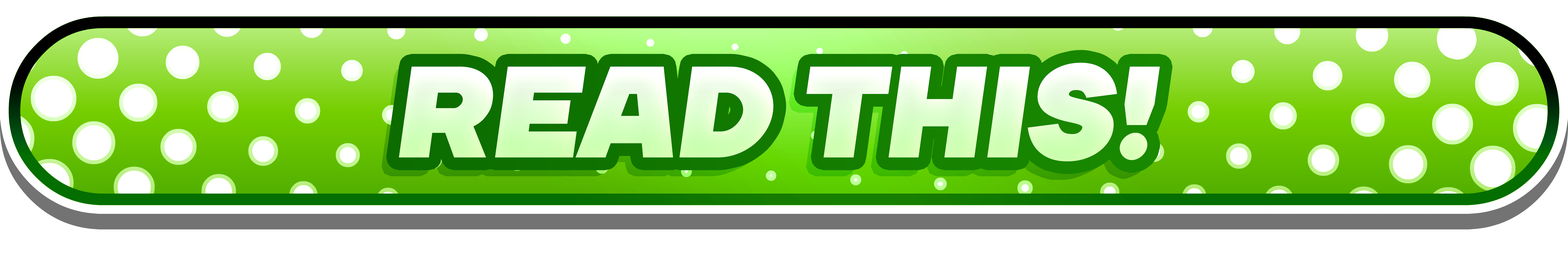
<style>
.page{position:relative;width:1568px;height:258px;background:#ffffff}
.page>*{position:absolute;margin:0}
.t1{font:129.9px "TTFirs-BlackItalic"}
</style>
<div class="page">
<p class="t1" style="left:399px;top:63px;width:761px;height:99px">READ THIS!</p>
</div>
